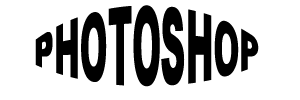
<style>
.page{position:relative;width:300px;height:100px;background:#ffffff}
.page>*{position:absolute;margin:0}
.t1{font:32px "Arial-Black";color:#000000}
</style>
<div class="page">
<p class="t1" style="left:35px;top:5px;width:224px;height:82px;text-align:center">PHOTOSHOP</p>
</div>
